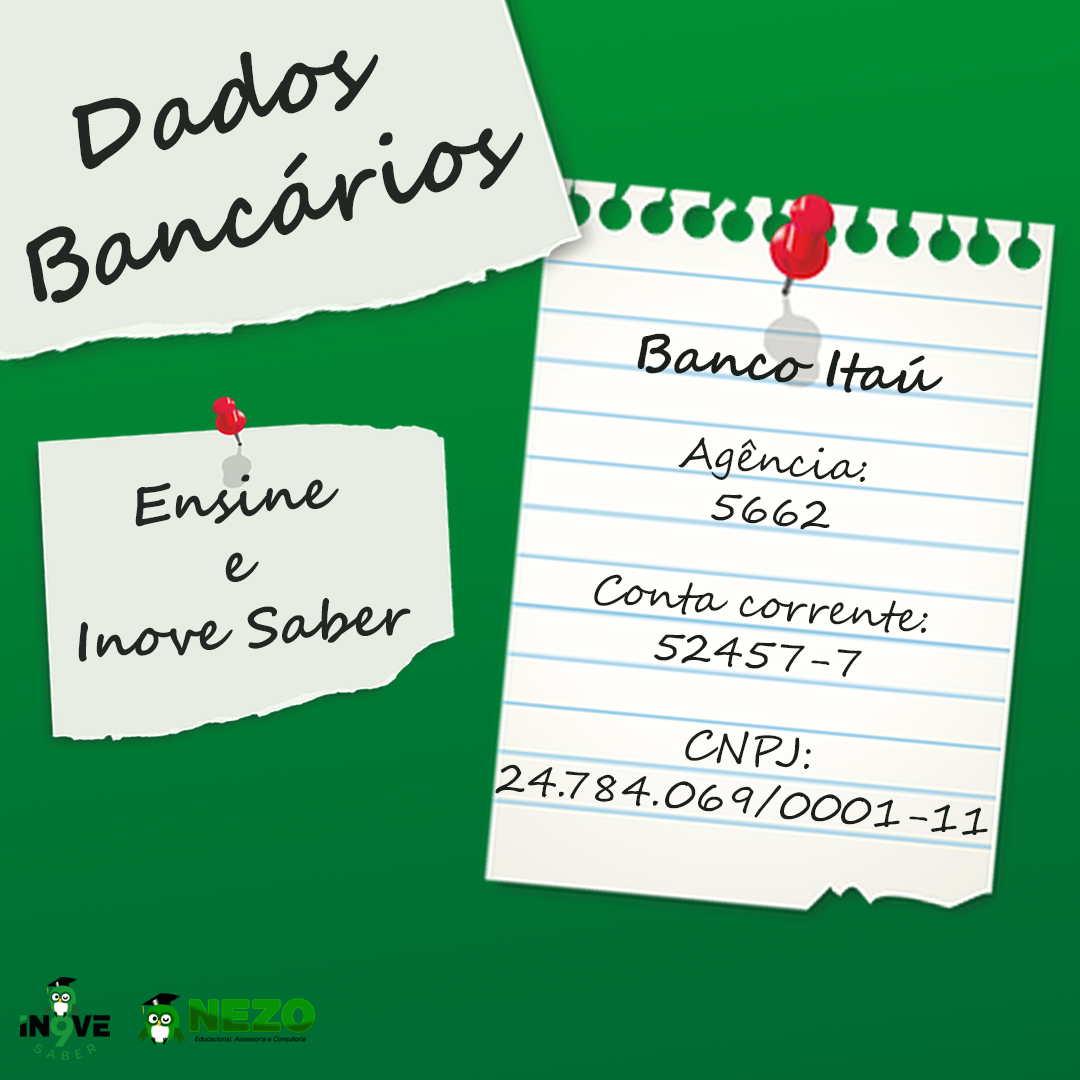
<style>
.page{position:relative;width:1080px;height:1080px;background:#e8ede4}
.page>*{position:absolute;margin:0}
.t1{font:95.2px "SegoeScript-Bold";color:#242624}
.t2{font:42px "SegoeScript";color:#1b1f1b}
.t3{font:52px "SegoeScript-Bold";color:#1b1f1b}
.t4{font:42px/92px "SegoeScript";color:#1b1f1b}
.t5{font:42px/94px "SegoeScript";color:#1b1f1b}
.t6{font:42px/96px "SegoeScript";color:#1b1f1b}
.t7{font:54.5px "SegoeScript-Bold";color:#242624}
</style>
<div class="page">
<p class="t1" style="left:26px;top:50px;width:498px;height:253px;text-align:center;rotate:-15deg">Dados <br>Bancários</p>
<p class="t2" style="left:495px;top:333px;width:493px;height:502px;text-align:center;rotate:5deg"><span class="t3">Banco Itaú <br></span><span class="t4">Agência: <br></span>5662<br><span class="t5">Conta corrente: </span>52457-7 <br><span class="t6">CNPJ: <br></span>24.784.069/0001-11</p>
<p class="t7" style="left:78px;top:474px;width:333px;height:188px;text-align:center;rotate:-5deg">Ensine<br>e<br>Inove Saber</p>
</div>
